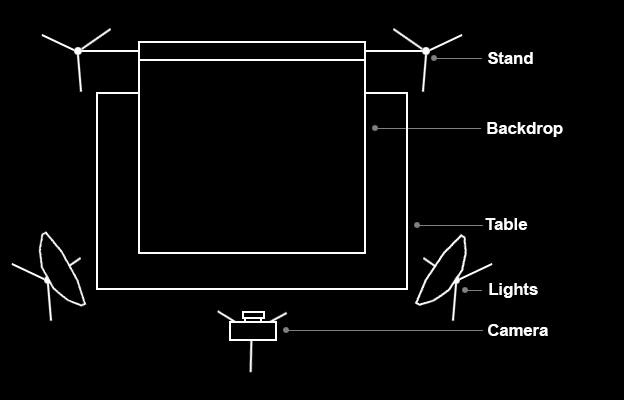
<style>
.page{position:relative;width:624px;height:400px;background:#000000}
.page>*{position:absolute;margin:0}
.t1{font:16.7px "Arial-BoldMT";color:#ffffff}
</style>
<div class="page">
<p class="t1" style="left:488px;top:52px;width:45px;height:12px">Stand</p>
<p class="t1" style="left:487px;top:122px;width:76px;height:15px">Backdrop</p>
<p class="t1" style="left:485px;top:218px;width:43px;height:12px">Table</p>
<p class="t1" style="left:489px;top:283px;width:49px;height:15px">Lights</p>
<p class="t1" style="left:488px;top:324px;width:60px;height:12px">Camera</p>
</div>
